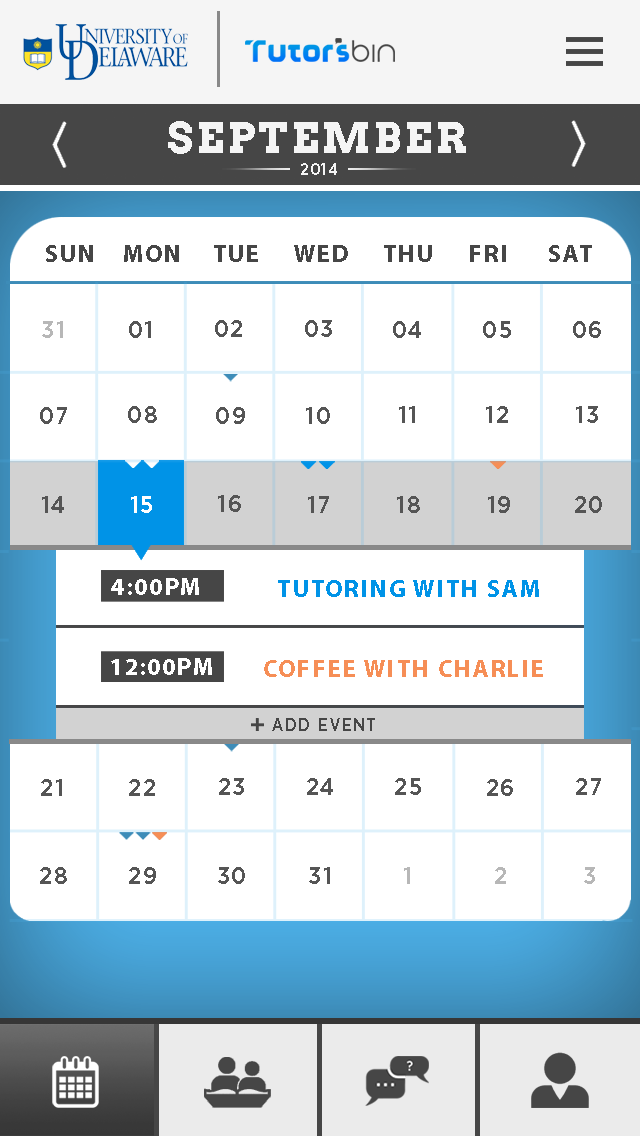
<style>
.page{position:relative;width:640px;height:1136px;background:#ffffff}
.page>*{position:absolute;margin:0}
.t1{font:41.7px "Arvo-Bold";letter-spacing:0.075em;color:#f5f5f5}
.t2{font:16.7px "GothamNarrow-Medium";letter-spacing:0.075em;color:#f5f5f5}
.t3{font:24.3px "MyriadPro-Bold";letter-spacing:0.075em;color:#464646}
.t4{font:24.3px "GothamNarrow-Medium";letter-spacing:0.075em;color:#b7b7b7}
.t5{font:24.3px "GothamNarrow-Medium";letter-spacing:0.075em;color:#555555}
.t6{font:24.3px "GothamNarrow-Medium";letter-spacing:0.075em;color:#ffffff}
.t7{font:24.3px "MyriadPro-Bold";letter-spacing:0.075em;color:#ffffff}
.t8{font:24.3px "MyriadPro-Bold";letter-spacing:0.075em;color:#0093e7}
.t9{font:24.3px "MyriadPro-Bold";letter-spacing:0.075em;color:#f68e56}
.t10{font:17.7px "GothamNarrow-Medium";letter-spacing:0.075em;color:#464646}
</style>
<div class="page">
<p class="t1" style="left:168px;top:121px;width:298px;height:33px">SEPTEMBER</p>
<p class="t2" style="left:301px;top:163px;width:36px;height:12px">2014</p>
<p class="t3" style="left:46px;top:245px;width:47px;height:17px">SUN</p>
<p class="t3" style="left:124px;top:245px;width:55px;height:17px">MON</p>
<p class="t3" style="left:214px;top:245px;width:44px;height:17px">TUE</p>
<p class="t3" style="left:294px;top:245px;width:54px;height:17px">WED</p>
<p class="t3" style="left:384px;top:245px;width:48px;height:17px">THU</p>
<p class="t3" style="left:470px;top:245px;width:36px;height:17px">FRI</p>
<p class="t3" style="left:549px;top:245px;width:43px;height:17px">SAT</p>
<p class="t4" style="left:42px;top:321px;width:21px;height:17px">31</p>
<p class="t5" style="left:129px;top:321px;width:22px;height:17px">01</p>
<p class="t5" style="left:215px;top:320px;width:27px;height:17px">02</p>
<p class="t5" style="left:305px;top:320px;width:27px;height:17px">03</p>
<p class="t5" style="left:393px;top:321px;width:28px;height:17px">04</p>
<p class="t5" style="left:483px;top:321px;width:28px;height:17px">05</p>
<p class="t5" style="left:573px;top:321px;width:28px;height:17px">06</p>
<p class="t5" style="left:40px;top:407px;width:27px;height:17px">07</p>
<p class="t5" style="left:128px;top:406px;width:29px;height:17px">08</p>
<p class="t5" style="left:216px;top:407px;width:29px;height:17px">09</p>
<p class="t5" style="left:306px;top:407px;width:24px;height:17px">10</p>
<p class="t5" style="left:399px;top:406px;width:16px;height:17px">11</p>
<p class="t5" style="left:486px;top:406px;width:22px;height:17px">12</p>
<p class="t5" style="left:576px;top:406px;width:22px;height:17px">13</p>
<p class="t5" style="left:42px;top:496px;width:22px;height:17px">14</p>
<p class="t6" style="left:131px;top:496px;width:21px;height:17px">15</p>
<p class="t5" style="left:218px;top:495px;width:23px;height:17px">16</p>
<p class="t5" style="left:308px;top:496px;width:21px;height:17px">17</p>
<p class="t5" style="left:397px;top:496px;width:23px;height:17px">18</p>
<p class="t5" style="left:488px;top:496px;width:22px;height:17px">19</p>
<p class="t5" style="left:575px;top:496px;width:27px;height:17px">20</p>
<p class="t7" style="left:111px;top:578px;width:88px;height:17px">4:00PM</p>
<p class="t8" style="left:278px;top:580px;width:261px;height:17px">TUTORING WITH SAM</p>
<p class="t7" style="left:111px;top:658px;width:101px;height:17px">12:00PM</p>
<p class="t9" style="left:264px;top:660px;width:279px;height:17px">COFFEE WITH CHARLIE</p>
<p class="t10" style="left:272px;top:718px;width:103px;height:13px">ADD EVENT</p>
<p class="t5" style="left:41px;top:779px;width:21px;height:17px">21</p>
<p class="t5" style="left:129px;top:779px;width:26px;height:17px">22</p>
<p class="t5" style="left:219px;top:778px;width:25px;height:17px">23</p>
<p class="t5" style="left:307px;top:778px;width:26px;height:17px">24</p>
<p class="t5" style="left:395px;top:778px;width:26px;height:17px">25</p>
<p class="t5" style="left:487px;top:779px;width:26px;height:17px">26</p>
<p class="t5" style="left:576px;top:778px;width:25px;height:17px">27</p>
<p class="t5" style="left:40px;top:867px;width:27px;height:17px">28</p>
<p class="t5" style="left:129px;top:867px;width:27px;height:17px">29</p>
<p class="t5" style="left:218px;top:867px;width:27px;height:17px">30</p>
<p class="t5" style="left:309px;top:867px;width:21px;height:17px">31</p>
<p class="t4" style="left:404px;top:867px;width:6px;height:17px">1</p>
<p class="t4" style="left:495px;top:867px;width:11px;height:17px">2</p>
<p class="t4" style="left:584px;top:867px;width:11px;height:17px">3</p>
</div>
